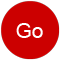
<style>
.page{position:relative;width:60px;height:60px;background:#cc0000}
.page>*{position:absolute;margin:0}
.t1{font:21px "ArialMT";color:#ffffff}
</style>
<div class="page">
<p class="t1" style="left:16px;top:23px;width:27px;height:15px">Go</p>
</div>
